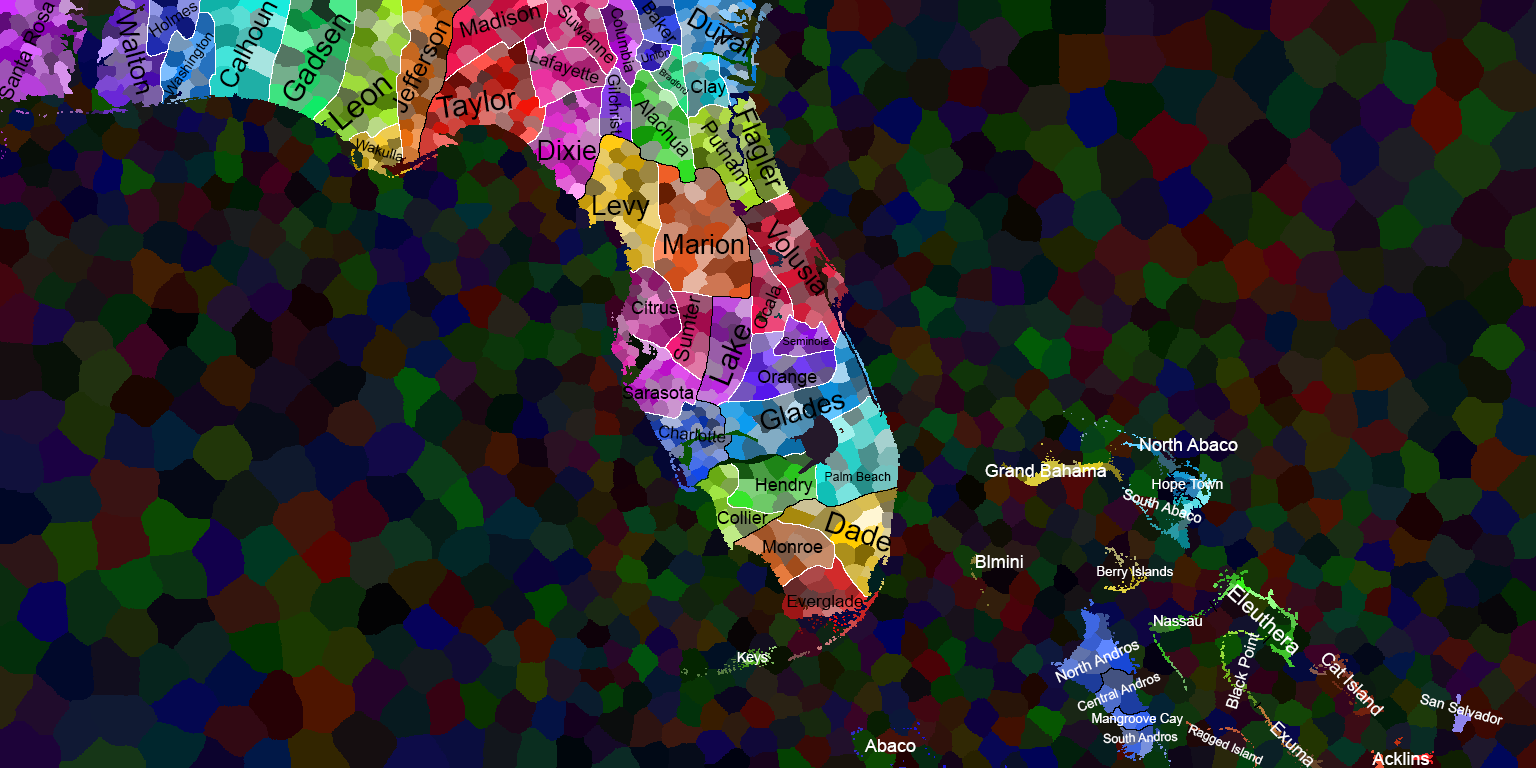
<style>
.page{position:relative;width:1536px;height:768px}
.page>*{position:absolute;margin:0}
.t1{font:20.5px "ArialMT";color:#000000}
.t2{font:16px "ArialMT";color:#000000}
.t3{font:26.2px "ArialMT";color:#000000}
.t4{font:22px "ArialMT";color:#000000}
.t5{font:18px "ArialMT";color:#000000}
.t6{font:27.2px "ArialMT";color:#000000}
.t7{font:29.2px "ArialMT";color:#000000}
.t8{font:15.6px "ArialMT";color:#000000}
.t9{font:27.4px "ArialMT";color:#000000}
.t10{font:25.1px "ArialMT";color:#000000}
.t11{font:14.3px "ArialMT";color:#000000}
.t12{font:17.6px "ArialMT";color:#000000}
.t13{font:11.4px "ArialMT";color:#000000}
.t14{font:31.8px "ArialMT";color:#000000}
.t15{font:16.5px "ArialMT";color:#000000}
.t16{font:9.1px "ArialMT"}
.t17{font:30.3px "ArialMT";color:#000000}
.t18{font:19.9px "ArialMT";color:#000000}
.t19{font:27.7px "ArialMT";color:#000000}
.t20{font:21.1px "ArialMT";color:#000000}
.t21{font:14.2px "ArialMT";color:#000000}
.t22{font:27.3px "ArialMT";color:#000000}
.t23{font:26.7px "ArialMT";color:#000000}
.t24{font:20.7px "ArialMT";color:#000000}
.t25{font:11.2px "ArialMT";color:#000000}
.t26{font:27.8px "ArialMT";color:#000000}
.t27{font:16.7px "ArialMT";color:#000000}
.t28{font:18px "ArialMT";color:#ffffff}
.t29{font:12.3px "ArialMT";color:#000000}
.t30{font:14.4px "ArialMT";color:#ffffff}
.t31{font:14.5px "ArialMT";color:#ffffff}
.t32{font:29.4px "ArialMT";color:#000000}
.t33{font:13.2px "ArialMT";color:#ffffff}
.t34{font:21.4px "ArialMT";color:#ffffff}
.t35{font:17.1px "ArialMT";color:#000000}
.t36{font:14.7px "ArialMT";color:#ffffff}
.t37{font:15.3px "ArialMT";color:#ffffff}
.t38{font:15.8px "ArialMT";color:#ffffff}
.t39{font:13.8px "ArialMT";color:#ffffff}
.t40{font:13.3px "ArialMT";color:#ffffff}
.t41{font:14.1px "ArialMT";color:#ffffff}
.t42{font:13px "ArialMT";color:#ffffff}
.t43{font:12.4px "ArialMT";color:#ffffff}
</style>
<div class="page">
<p class="t1" style="left:0px;top:2px;width:56px;height:98px;rotate:-65deg">Santa Rosa</p>
<p class="t2" style="left:148px;top:3px;width:50px;height:35px;rotate:-33deg">Holmes</p>
<p class="t3" style="left:220px;top:1px;width:58px;height:86px;rotate:-63deg">Calhoun</p>
<p class="t4" style="left:459px;top:6px;width:82px;height:32px;rotate:-15deg">Madison</p>
<p class="t5" style="left:557px;top:5px;width:57px;height:59px;rotate:45deg">Suwanne</p>
<p class="t5" style="left:641px;top:0px;width:36px;height:43px;rotate:53deg">Baker</p>
<p class="t6" style="left:116px;top:11px;width:33px;height:84px;rotate:75deg">Walton</p>
<p class="t7" style="left:283px;top:14px;width:69px;height:87px;rotate:-57deg">Gadsen</p>
<p class="t8" style="left:611px;top:8px;width:23px;height:65px;rotate:77deg">Columbia</p>
<p class="t9" style="left:686px;top:7px;width:68px;height:50px;rotate:30deg">Duval</p>
<p class="t10" style="left:392px;top:20px;width:59px;height:93px;rotate:-63deg">Jefferson</p>
<p class="t11" style="left:163px;top:32px;width:51px;height:63px;rotate:-55deg">Washington</p>
<p class="t12" style="left:530px;top:49px;width:69px;height:35px;rotate:19deg">Lafayette</p>
<p class="t13" style="left:641px;top:50px;width:30px;height:13px;rotate:-15deg">Union</p>
<p class="t14" style="left:327px;top:77px;width:66px;height:54px;rotate:-40deg">Leon</p>
<p class="t15" style="left:607px;top:74px;width:16px;height:61px;rotate:87deg">Gilchrist</p>
<p class="t16" style="left:659px;top:68px;width:30px;height:27px;rotate:40deg">Bradford</p>
<p class="t17" style="left:435px;top:89px;width:81px;height:31px;rotate:-8deg">Taylor</p>
<p class="t5" style="left:691px;top:80px;width:36px;height:17px">Clay</p>
<p class="t18" style="left:634px;top:99px;width:55px;height:59px;rotate:48deg">Alachua</p>
<p class="t19" style="left:735px;top:107px;width:46px;height:79px;rotate:67deg">Flagler</p>
<p class="t20" style="left:700px;top:119px;width:49px;height:68px;rotate:56deg">Putnam</p>
<p class="t21" style="left:356px;top:138px;width:47px;height:25px;rotate:16deg">Wakulla</p>
<p class="t22" style="left:538px;top:140px;width:58px;height:20px">Dixie</p>
<p class="t19" style="left:593px;top:195px;width:57px;height:26px">Levy</p>
<p class="t23" style="left:767px;top:219px;width:59px;height:78px;rotate:50deg">Volusia</p>
<p class="t6" style="left:664px;top:234px;width:80px;height:20px">Marion</p>
<p class="t5" style="left:754px;top:286px;width:28px;height:43px;rotate:-67deg">Ocala</p>
<p class="t5" style="left:631px;top:301px;width:47px;height:13px">Citrus</p>
<p class="t24" style="left:673px;top:295px;width:28px;height:67px;rotate:-78deg">Sumter</p>
<p class="t17" style="left:708px;top:324px;width:43px;height:62px;rotate:-68deg">Lake</p>
<p class="t25" style="left:782px;top:337px;width:47px;height:8px">Seminole</p>
<p class="t5" style="left:758px;top:370px;width:59px;height:17px">Orange</p>
<p class="t5" style="left:622px;top:386px;width:72px;height:13px">Sarasota</p>
<p class="t26" style="left:760px;top:394px;width:85px;height:36px;rotate:-16deg">Glades</p>
<p class="t27" style="left:658px;top:425px;width:68px;height:18px;rotate:5deg">Charlotte</p>
<p class="t28" style="left:1140px;top:438px;width:98px;height:13px">North Abaco</p>
<p class="t29" style="left:825px;top:472px;width:66px;height:9px">Palm Beach</p>
<p class="t28" style="left:985px;top:464px;width:121px;height:13px">Grand Bahama</p>
<p class="t5" style="left:756px;top:478px;width:57px;height:17px">Hendry</p>
<p class="t30" style="left:1152px;top:479px;width:71px;height:13px">Hope Town</p>
<p class="t31" style="left:1123px;top:489px;width:79px;height:34px;rotate:18deg">South Abaco</p>
<p class="t32" style="left:824px;top:510px;width:67px;height:42px;rotate:19deg">Dade</p>
<p class="t5" style="left:717px;top:511px;width:51px;height:13px">Collier</p>
<p class="t5" style="left:763px;top:540px;width:60px;height:13px">Monroe</p>
<p class="t28" style="left:976px;top:555px;width:47px;height:13px">Blmini</p>
<p class="t33" style="left:1097px;top:566px;width:76px;height:13px">Berry Islands</p>
<p class="t34" style="left:1227px;top:584px;width:72px;height:72px;rotate:43deg">Eleuthera</p>
<p class="t35" style="left:787px;top:595px;width:76px;height:15px">Everglade</p>
<p class="t36" style="left:1154px;top:615px;width:48px;height:11px">Nassau</p>
<p class="t37" style="left:1055px;top:641px;width:85px;height:42px;rotate:-24deg">North Andros</p>
<p class="t38" style="left:1225px;top:632px;width:35px;height:77px;rotate:-73deg">Black Point</p>
<p class="t39" style="left:737px;top:652px;width:31px;height:13px">Keys</p>
<p class="t28" style="left:1322px;top:652px;width:62px;height:65px;rotate:46deg">Cat Island</p>
<p class="t40" style="left:1077px;top:673px;width:84px;height:38px;rotate:-22deg">Central Andros</p>
<p class="t41" style="left:1420px;top:694px;width:83px;height:31px;rotate:15deg">San Salvador</p>
<p class="t42" style="left:1092px;top:713px;width:91px;height:13px">Mangroove Cay</p>
<p class="t43" style="left:1188px;top:724px;width:76px;height:41px;rotate:25deg">Ragged Island</p>
<p class="t28" style="left:1269px;top:721px;width:45px;height:47px;rotate:45deg">Exuma</p>
<p class="t43" style="left:1103px;top:731px;width:75px;height:13px;rotate:-2deg">South Andros</p>
<p class="t28" style="left:864px;top:739px;width:52px;height:13px">Abaco</p>
<p class="t28" style="left:1372px;top:752px;width:57px;height:13px">Acklins</p>
</div>
